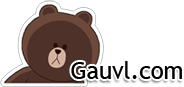
<style>
.page{position:relative;width:184px;height:87px;background:#ffffff}
.page>*{position:absolute;margin:0}
.t1{font:23.7px "TrebuchetMS";color:#000000}
</style>
<div class="page">
<p class="t1" style="left:71px;top:61px;width:111px;height:18px">Gauvl.com</p>
</div>
